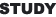
<style>
.page{position:relative;width:56px;height:17px;background:#ffffff}
.page>*{position:absolute;margin:0}
.t1{font:15px "Arial-Black";color:#202124}
</style>
<div class="page">
<p class="t1" style="left:0px;top:2px;width:57px;height:13px">STUDY</p>
</div>
